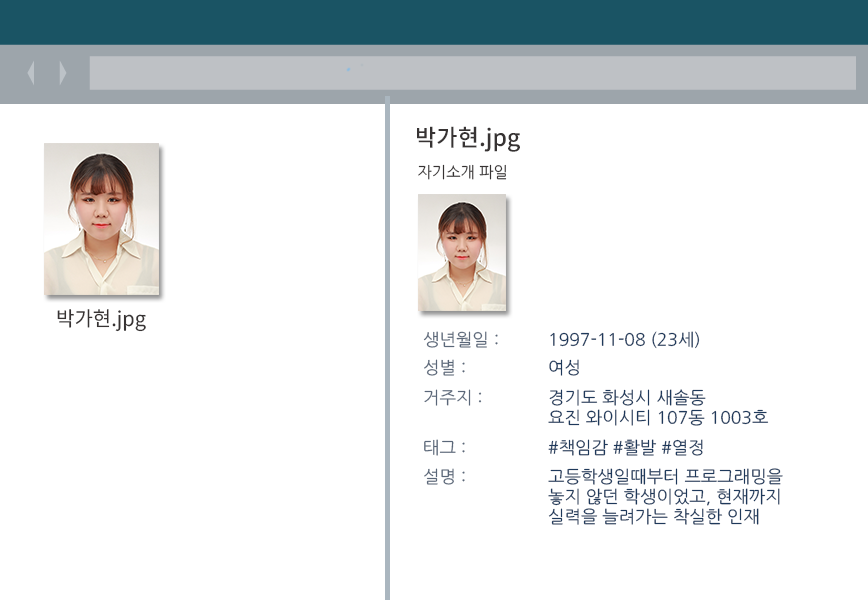
<style>
.page{position:relative;width:868px;height:600px;background:#ffffff}
.page>*{position:absolute;margin:0}
.t1{font:23.1px "NotoSansKR-Medium";color:#373333}
.t2{font:15.5px "NanumGothic";color:#373333}
.t3{font:20.2px "NotoSansKR-Regular";color:#373333}
.t4{font:17px "NanumGothic";color:#5a6779}
.t5{font:17px "NanumGothic";color:#1e395b}
.t6{font:17px/20px "NanumGothic";color:#1e395b}
</style>
<div class="page">
<p class="t1" style="left:417px;top:126px;width:103px;height:26px">박가현.jpg</p>
<p class="t2" style="left:418px;top:164px;width:89px;height:16px">자기소개 파일</p>
<p class="t3" style="left:57px;top:309px;width:89px;height:23px">박가현.jpg</p>
<p class="t4" style="left:423px;top:331px;width:75px;height:17px">생년월일 :</p>
<p class="t5" style="left:550px;top:331px;width:150px;height:18px">1997-11-08 (23세)</p>
<p class="t4" style="left:424px;top:359px;width:41px;height:17px">성별 :</p>
<p class="t5" style="left:549px;top:359px;width:30px;height:17px">여성</p>
<p class="t4" style="left:424px;top:389px;width:58px;height:17px">거주지 :</p>
<p class="t6" style="left:548px;top:389px;width:221px;height:37px">경기도 화성시 새솔동 <br>요진 와이시티 107동 1003호</p>
<p class="t4" style="left:424px;top:439px;width:41px;height:17px">태그 :</p>
<p class="t5" style="left:548px;top:439px;width:155px;height:17px">#책임감 #활발 #열정</p>
<p class="t4" style="left:424px;top:468px;width:41px;height:17px">설명 :</p>
<p class="t6" style="left:548px;top:468px;width:235px;height:57px">고등학생일때부터 프로그래밍을<br>놓지 않던 학생이었고, 현재까지 <br>실력을 늘려가는 착실한 인재</p>
</div>
